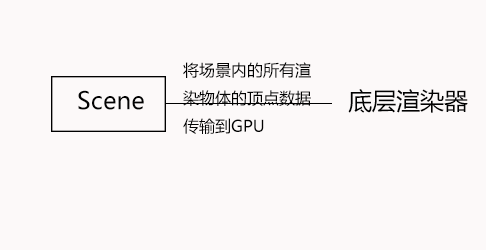
<style>
.page{position:relative;width:486px;height:250px;background:#fcf9f9}
.page>*{position:absolute;margin:0}
.t1{font:16px "MicrosoftYaHei";color:#020202}
.t2{font:24px "MicrosoftYaHei";color:#020202}
</style>
<div class="page">
<p class="t1" style="left:183px;top:62px;width:128px;height:72px">将场景内的所有渲染物体的顶点数据<br>传输到GPU</p>
<p class="t2" style="left:348px;top:89px;width:120px;height:24px">底层渲染器</p>
<p class="t2" style="left:78px;top:90px;width:66px;height:20px">Scene</p>
</div>
